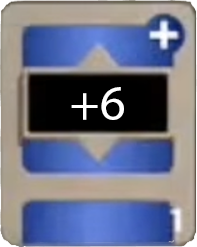
<style>
.page{position:relative;width:197px;height:247px}
.page>*{position:absolute;margin:0}
.t1{font:50px "MyriadPro-Regular";color:#ffffff}
</style>
<div class="page">
<p class="t1" style="left:71px;top:87px;width:53px;height:33px">+6</p>
</div>
